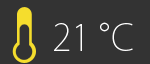
<style>
.page{position:relative;width:150px;height:64px;background:#333333}
.page>*{position:absolute;margin:0}
.t1{font:36px "KozGoPr6N-ExtraLight";color:#ffffff}
</style>
<div class="page">
<p class="t1" style="left:54px;top:22px;width:79px;height:29px">21 °C</p>
</div>
